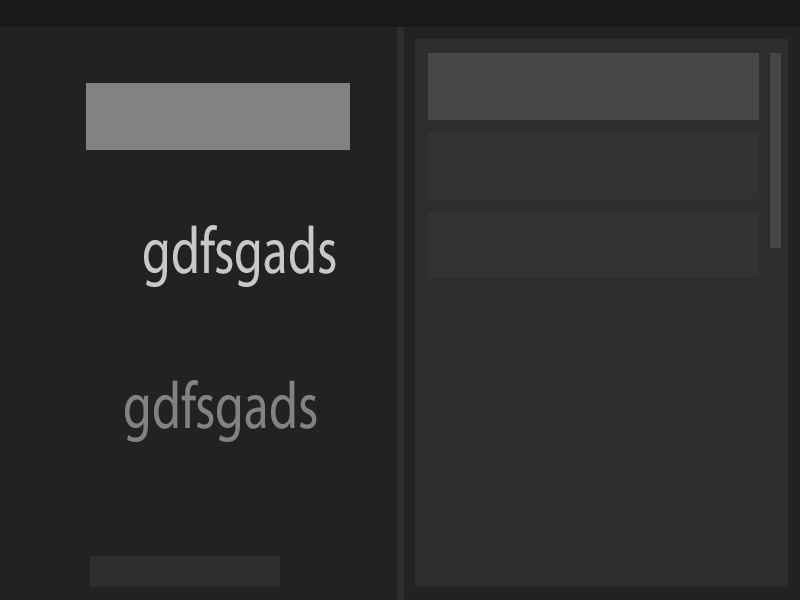
<style>
.page{position:relative;width:800px;height:600px;background:#222222}
.page>*{position:absolute;margin:0}
.t1{font:66.7px "MyriadPro-Regular";color:#c8c8c8}
.t2{font:66.7px "MyriadPro-Regular";color:#828282}
</style>
<div class="page">
<p class="t1" style="left:144px;top:225px;width:192px;height:62px">gdfsgadsfa</p>
<p class="t2" style="left:125px;top:380px;width:192px;height:62px">gdfsgadsfa</p>
</div>
